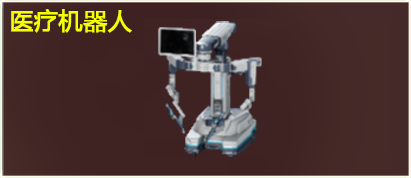
<style>
.page{position:relative;width:411px;height:178px}
.page>*{position:absolute;margin:0}
.t1{font:24px "MicrosoftYaHeiUI";color:#f4ff00;font-weight:bold}
</style>
<div class="page">
<p class="t1" style="left:11px;top:9px;width:121px;height:24px">医疗机器人</p>
</div>
